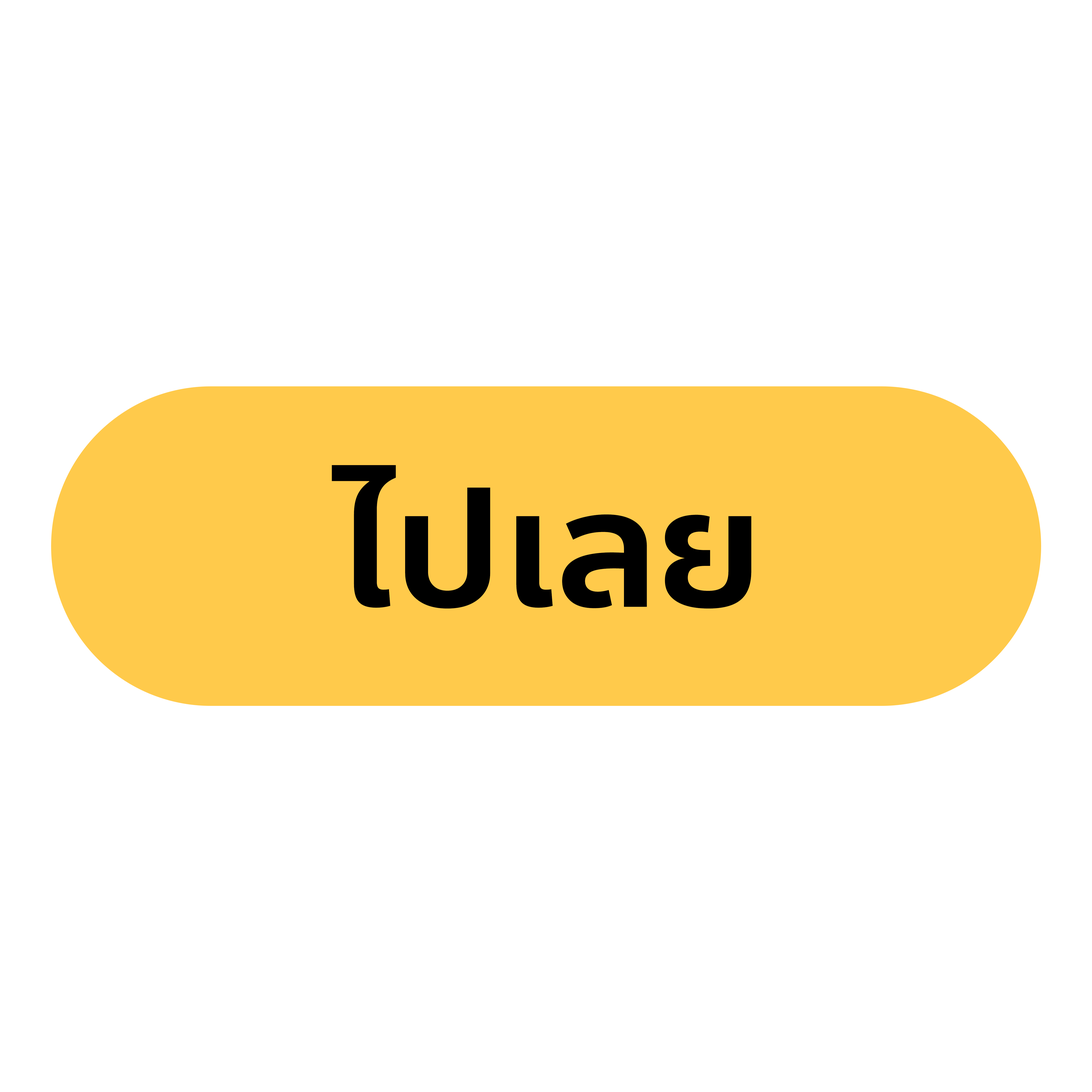
<style>
.page{position:relative;width:1092px;height:1092px;background:#ffffff}
.page>*{position:absolute;margin:0}
.t1{font:167.9px "Anakotmai-Medium";color:#000000}
</style>
<div class="page">
<p class="t1" style="left:332px;top:465px;width:419px;height:144px">ไปเลย</p>
</div>
